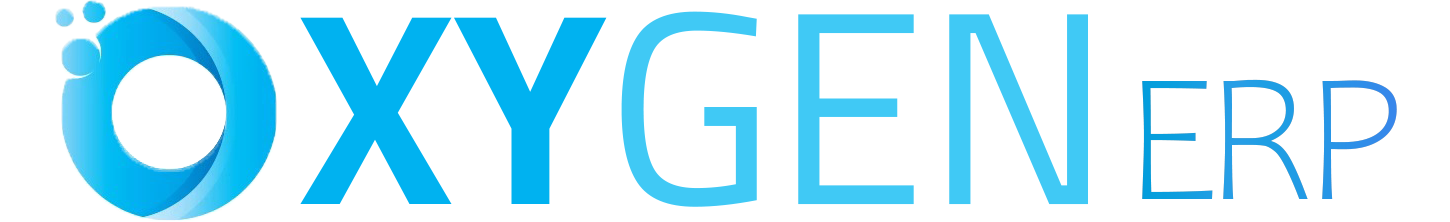
<style>
.page{position:relative;width:1450px;height:222px;background:#ffffff}
.page>*{position:absolute;margin:0}
.t1{font:273.8px "TitilliumWeb-Regular";color:#40c9f5}
.t2{font:273.8px "TitilliumWeb-Bold";color:#00b2f0}
.t3{font:186.3px "Candara-Light";letter-spacing:-0.08em;color:#219de5}
</style>
<div class="page">
<p class="t1" style="left:300px;top:11px;width:788px;height:196px"><span class="t2">XY</span>GEN</p>
<p class="t3" style="left:1142px;top:79px;width:255px;height:120px">ERP</p>
</div>
